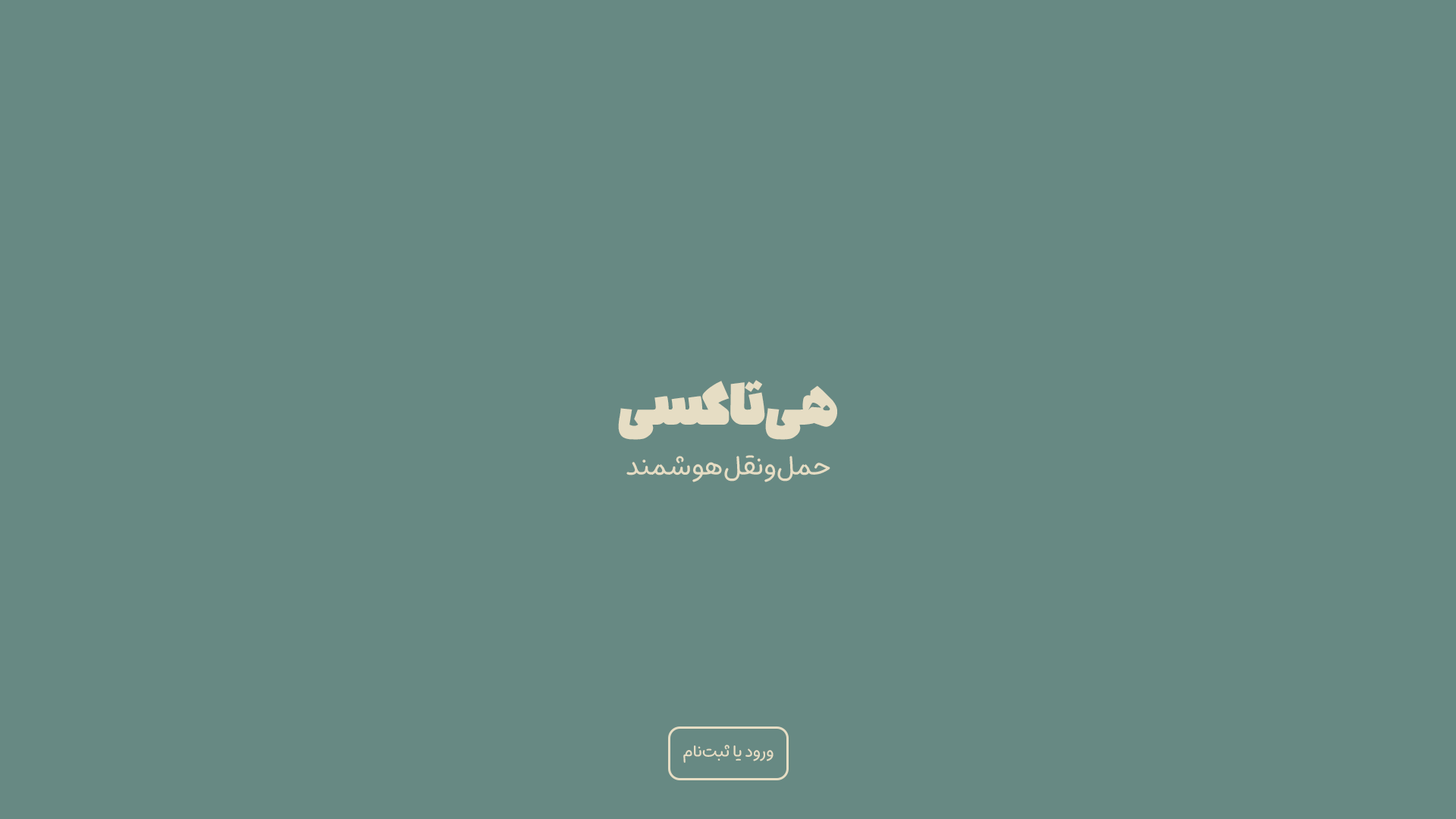
<style>
.page{position:relative;width:1456px;height:819px;background:#678983}
.page>*{position:absolute;margin:0}
.t1{font:72.8px "PlasmaLozengeDots-Bold";color:#e6ddc4}
.t2{font:28.1px "MikhakVF-Regular";color:#e6ddc4}
.t3{font:17px "MikhakVF-Regular";color:#e6ddc4}
</style>
<div class="page">
<p class="t1" style="left:618px;top:380px;width:219px;height:60px">هی‌تاکسی</p>
<p class="t2" style="left:626px;top:455px;width:204px;height:27px">حمل‌ونقل‌هوشمند</p>
<p class="t3" style="left:683px;top:745px;width:90px;height:18px">ورود یا ثبت‌نام</p>
</div>
